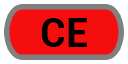
<style>
.page{position:relative;width:128px;height:64px;background:#f50e0e}
.page>*{position:absolute;margin:0}
.t1{font:40px "Roboto-Bold";color:#000000}
</style>
<div class="page">
<p class="t1" style="left:41px;top:18px;width:46px;height:29px">CE</p>
</div>
